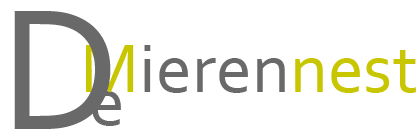
<style>
.page{position:relative;width:416px;height:129px;background:#ffffff}
.page>*{position:absolute;margin:0}
.t1{font:180px "Corbel";color:#696969}
.t2{font:72px "Corbel";color:#696969}
.t3{font:72px "Corbel";color:#c8c600}
</style>
<div class="page">
<p class="t1" style="left:14px;top:11px;width:97px;height:118px">D</p>
<p class="t2" style="left:86px;top:45px;width:330px;height:48px"><span class="t3">M</span>ieren<span class="t3">nest</span></p>
<p class="t2" style="left:92px;top:91px;width:29px;height:35px">e</p>
</div>
